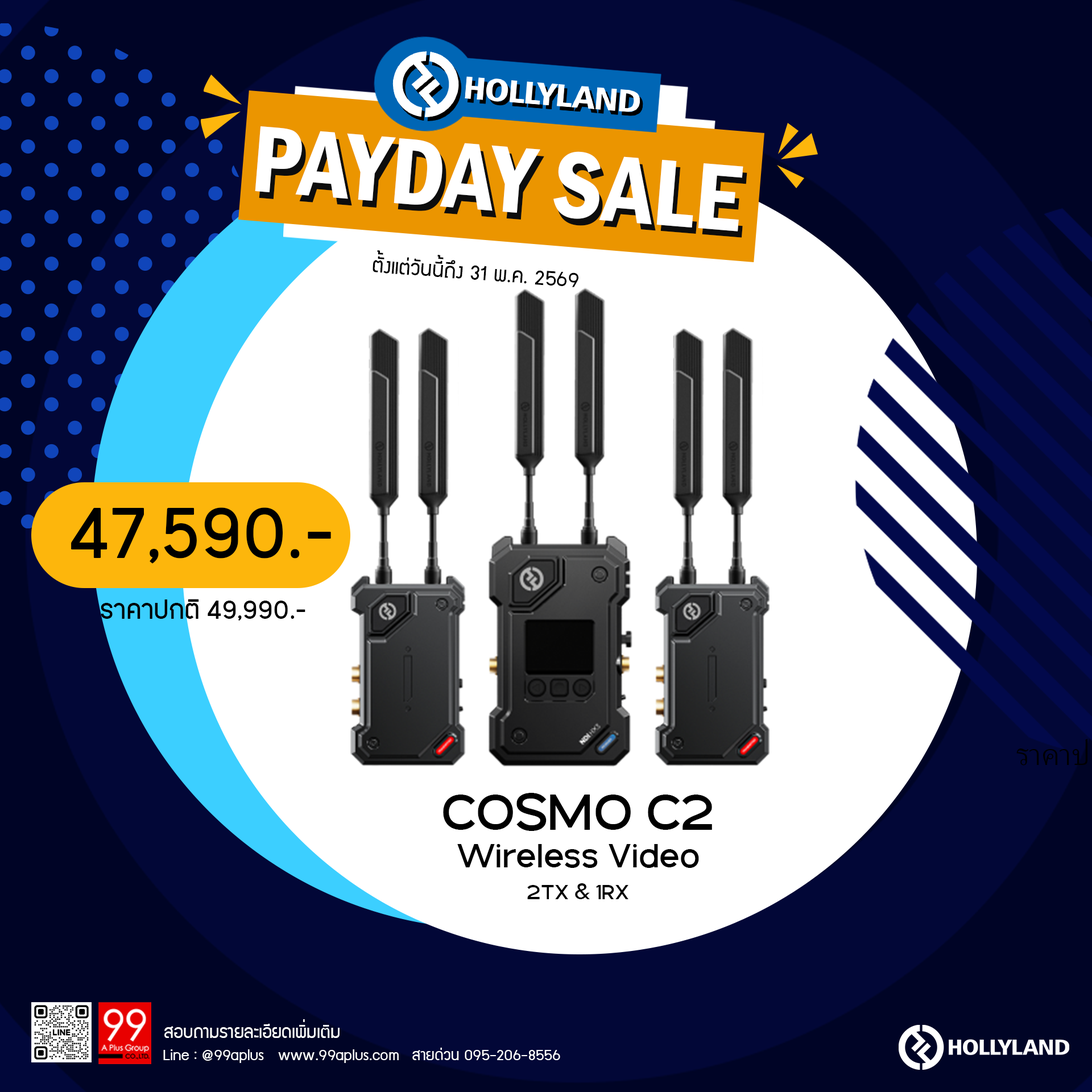
<style>
.page{position:relative;width:1092px;height:1092px;background:#ffffff}
.page>*{position:absolute;margin:0}
.t1{font:97.5px "FranklinGothic-DemiCond";color:#ffffff}
.t2{font:97.5px "FranklinGothic-DemiCond"}
.t3{font:23.2px "supermarket";color:#000000}
.t4{font:83.5px "PK-NakhonPathom-Demo";color:#000000}
.t5{font:30.3px "PK-NakhonPathom-Demo";color:#000000}
.t6{font:54px "GalakPro-Demo";color:#000000}
.t7{font:35.6px "GalakPro-Demo";color:#000000}
.t8{font:22.2px "GalakPro-Demo";color:#000000}
.t9{font:19.8px "supermarket";color:#ffffff}
.t10{font:17.2px "supermarket";color:#ffffff}
</style>
<div class="page">
<p class="t1" style="left:255px;top:126px;width:488px;height:105px;rotate:5deg">PAYDAY SALE</p>
<p class="t2" style="left:259px;top:133px;width:488px;height:105px;rotate:5deg">PAYDAY SALE</p>
<p class="t3" style="left:373px;top:250px;width:205px;height:37px;rotate:4deg">ตั้งแต่วันนี้ถึง 31 พ.ค. 2569</p>
<p class="t4" style="left:71px;top:507px;width:260px;height:57px">47,590.-</p>
<p class="t5" style="left:101px;top:599px;width:204px;height:21px">ราคาปกติ 49,990.-</p>
<p class="t6" style="left:443px;top:793px;width:269px;height:38px">COSMO C2</p>
<p class="t7" style="left:457px;top:844px;width:242px;height:24px">Wireless Video</p>
<p class="t8" style="left:527px;top:883px;width:101px;height:16px">2TX &amp; 1RX</p>
<p class="t9" style="left:164px;top:1019px;width:176px;height:19px">สอบถามรายละเอียดเพิ่มเติม</p>
<p class="t10" style="left:163px;top:1049px;width:236px;height:14px">Line : @99aplus   www.99aplus.com</p>
<p class="t10" style="left:412px;top:1048px;width:148px;height:12px">สายด่วน 095-206-8556</p>
</div>
